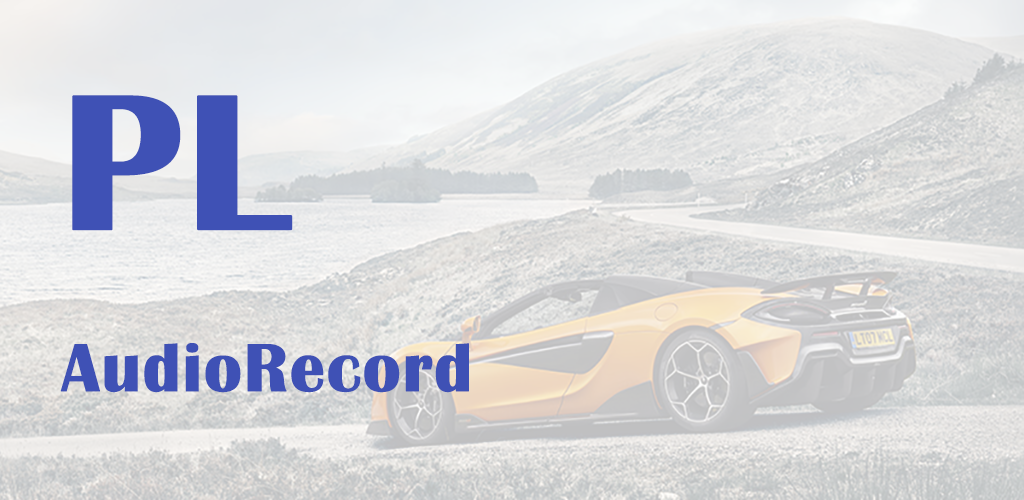
<style>
.page{position:relative;width:1024px;height:500px}
.page>*{position:absolute;margin:0}
.t1{font:70px/270px "BritannicBold";color:#3f51b5;font-weight:bold}
.t2{font:200px/270px "BritannicBold";color:#3f51b5;text-transform:uppercase;font-weight:bold}
</style>
<div class="page">
<p class="t1" style="left:60px;top:95px;width:409px;height:298px"><span class="t2">PL<br></span>AudioRecord</p>
</div>
